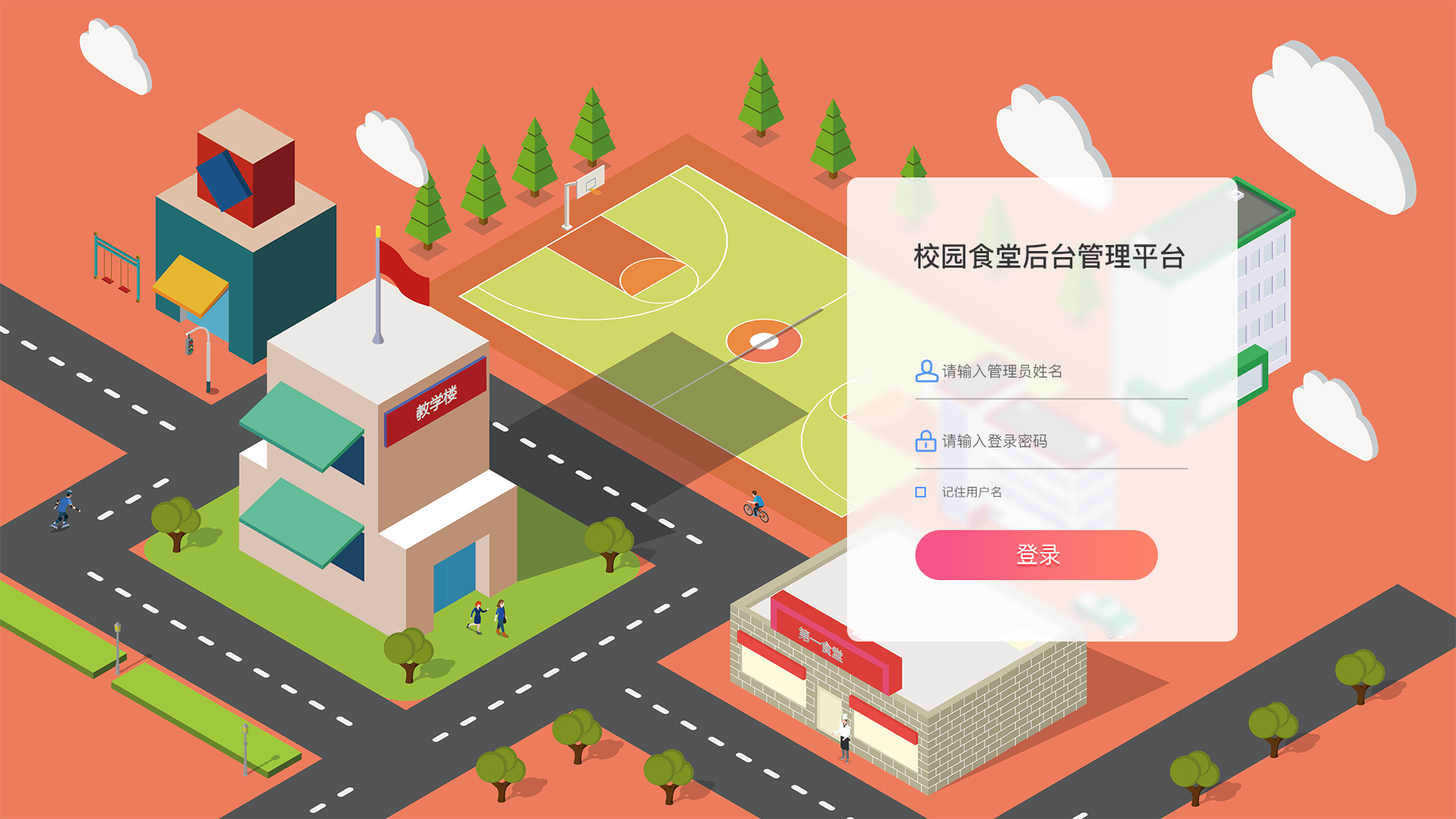
<style>
.page{position:relative;width:1456px;height:819px;background:#ed7c5d}
.page>*{position:absolute;margin:0}
.t1{font:27.3px "PingFang-SC-Bold";color:#333333}
.t2{font:15.2px "PingFang-SC-Medium";color:#666666}
.t3{font:12.1px "PingFang-SC-Medium";color:#666666}
.t4{font:22.7px "PingFang-SC-Medium";color:#ffffff}
</style>
<div class="page">
<p class="t1" style="left:914px;top:243px;width:271px;height:26px">校园食堂后台管理平台</p>
<p class="t2" style="left:942px;top:364px;width:120px;height:14px">请输入管理员姓名</p>
<p class="t2" style="left:942px;top:434px;width:105px;height:14px">请输入登录密码</p>
<p class="t3" style="left:942px;top:486px;width:59px;height:12px">记住用户名</p>
<p class="t4" style="left:1017px;top:544px;width:43px;height:21px">登录</p>
</div>
